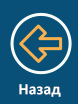
<style>
.page{position:relative;width:78px;height:104px;background:#085078}
.page>*{position:absolute;margin:0}
.t1{font:12px "Calibri-Bold";color:#ffffff}
</style>
<div class="page">
<p class="t1" style="left:19px;top:84px;width:42px;height:13px">Назад</p>
</div>
